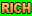
<style>
.page{position:relative;width:32px;height:16px;background:#00ff00}
.page>*{position:absolute;margin:0}
.t1{font:13.5px "Arial-Black";scale:0.79 1}
</style>
<div class="page">
<p class="t1" style="left:2px;top:3px;width:29px;height:10px">RICH</p>
</div>
